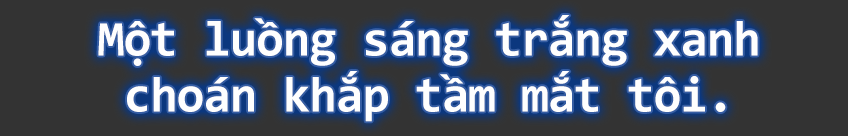
<style>
.page{position:relative;width:848px;height:136px;background:#333333}
.page>*{position:absolute;margin:0}
.t1{font:50px/48px "Consolas-Bold";letter-spacing:-0.02em;color:#fefefe}
</style>
<div class="page">
<p class="t1" style="left:98px;top:15px;width:660px;height:107px;text-align:center">Một luồng sáng trắng xanh<br>choán khắp tầm mắt tôi.</p>
</div>
